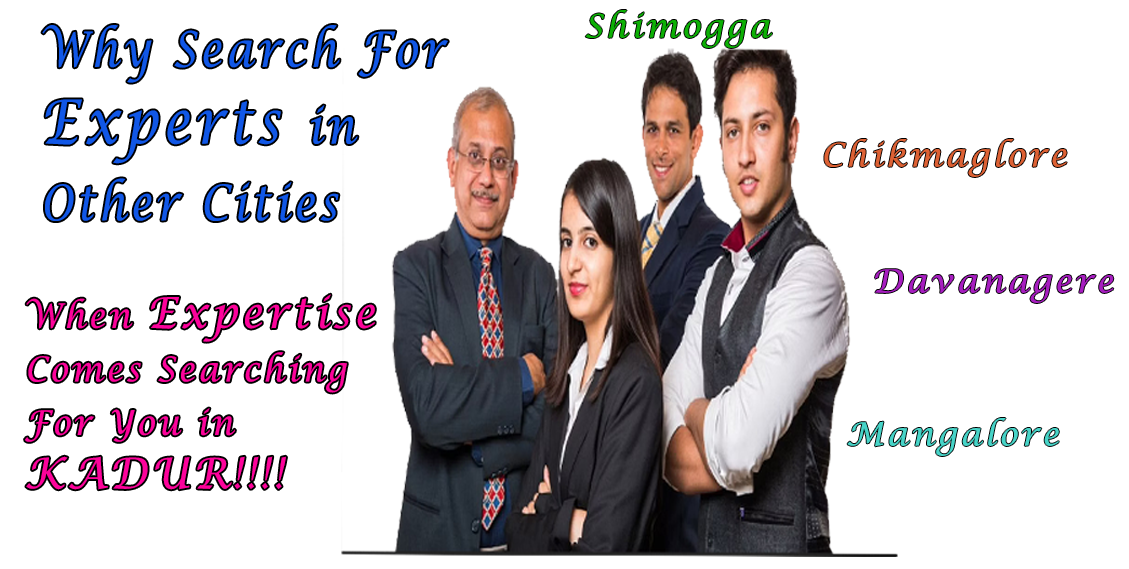
<style>
.page{position:relative;width:1129px;height:569px;background:#ffffff}
.page>*{position:absolute;margin:0}
.t1{font:32px "LucidaCalligraphy-Italic";letter-spacing:0.1em;color:#0db005}
.t2{font:48.5px/76.7px "LucidaCalligraphy-Italic";letter-spacing:0.1em;color:#1157e6;scale:0.84 1}
.t3{font:60.6px/76.7px "LucidaCalligraphy-Italic";letter-spacing:0.1em;color:#1157e6;scale:0.84 1}
.t4{font:32px "LucidaCalligraphy-Italic";letter-spacing:0.1em;color:#dd6134}
.t5{font:32px "LucidaCalligraphy-Italic";letter-spacing:0.1em;color:#a71ec0}
.t6{font:33.8px/53.5px "LucidaCalligraphy-Italic";letter-spacing:0.1em;color:#fc039b;scale:0.92 1}
.t7{font:42.2px/53.5px "LucidaCalligraphy-Italic";letter-spacing:0.1em;color:#fc039b;scale:0.92 1}
.t8{font:32px "LucidaCalligraphy-Italic";letter-spacing:0.1em;color:#47d4c8}
</style>
<div class="page">
<p class="t1" style="left:585px;top:10px;width:187px;height:38px">Shimogga</p>
<p class="t2" style="left:42px;top:25px;width:406px;height:196px">Why Search For <br><span class="t3">Experts </span>in <br>Other Cities</p>
<p class="t4" style="left:824px;top:139px;width:243px;height:38px">Chikmaglore</p>
<p class="t5" style="left:875px;top:269px;width:239px;height:34px">Davanagere</p>
<p class="t6" style="left:25px;top:294px;width:350px;height:196px">When <span class="t7">Expertise <br></span>Comes Searching <br>For You in <br><span class="t7">KADUR!!!!</span></p>
<p class="t8" style="left:847px;top:418px;width:212px;height:38px">Mangalore</p>
</div>
